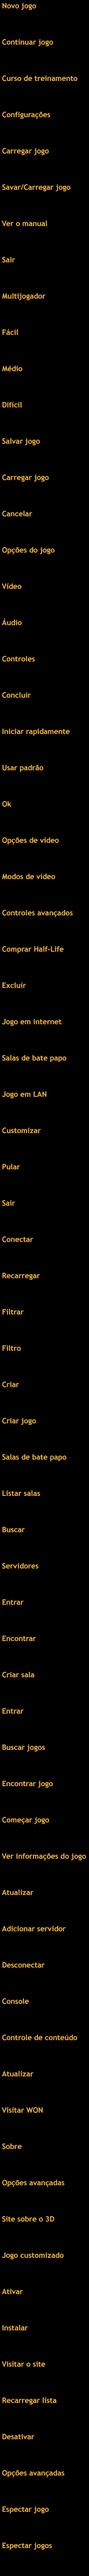
<style>
.page{position:relative;width:89px;height:2576px;background:#000000}
.page>*{position:absolute;margin:0}
.t1{font:7.4px/36.3px "TrebuchetMS-Bold";color:#f0b43f}
</style>
<div class="page">
<p class="t1" style="left:2px;top:3px;width:85px;height:2547px">Novo jogo<br>Continuar jogo<br>Curso de treinamento<br>Configurações<br>Carregar jogo<br>Savar/Carregar jogo<br>Ver o manual<br>Sair<br>Multijogador<br>Fácil<br>Médio<br>Difícil<br>Salvar jogo<br>Carregar jogo<br>Cancelar<br>Opções do jogo<br>Vídeo<br>Áudio<br>Controles<br>Concluír<br>Iniciar rapidamente<br>Usar padrão<br>Ok<br>Opções de vídeo<br>Modos de vídeo<br>Controles avançados<br>Comprar Half-Life<br>Excluír<br>Jogo em internet<br>Salas de bate papo<br>Jogo em LAN<br>Customizar<br>Pular<br>Sair<br>Conectar<br>Recarregar<br>Filtrar<br>Filtro<br>Criar<br>Criar jogo<br>Salas de bate papo<br>Listar salas<br>Buscar<br>Servidores<br>Entrar<br>Encontrar<br>Criar sala<br>Entrar<br>Buscar jogos<br>Encontrar jogo<br>Começar jogo<br>Ver informações do jogo<br>Atualizar<br>Adicionar servidor<br>Desconectar<br>Console<br>Controle de conteúdo<br>Atualizar<br>Visitar WON<br>Sobre<br>Opções avançadas<br>Site sobre o 3D<br>Jogo customizado<br>Ativar<br>Instalar<br>Visitar o site<br>Recarregar lista<br>Desativar<br>Opções avançadas<br>Espectar jogo<br>Espectar jogos</p>
</div>
